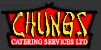
<style>
.page{position:relative;width:101px;height:50px}
.page>*{position:absolute;margin:0}
.t1{font:25.4px "ChineseTakeaway";font-weight:bold;scale:0.8 1}
.t2{font:7.2px "TimesNewRomanPSMT";font-weight:bold;scale:0.85 1}
</style>
<div class="page">
<p class="t1" style="left:11px;top:12px;width:76px;height:26px">CHUNGS</p>
<p class="t2" style="left:11px;top:39px;width:77px;height:6px">CATERING SERVICES LTD</p>
</div>
